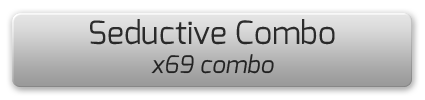
<style>
.page{position:relative;width:425px;height:100px}
.page>*{position:absolute;margin:0}
.t1{font:32px "Exo-Regular";color:#2a2a2a}
.t2{font:24px "Exo-Italic";color:#2a2a2a}
</style>
<div class="page">
<p class="t1" style="left:90px;top:19px;width:245px;height:55px;text-align:center">Seductive Combo<br><span class="t2">x69 combo</span></p>
</div>
